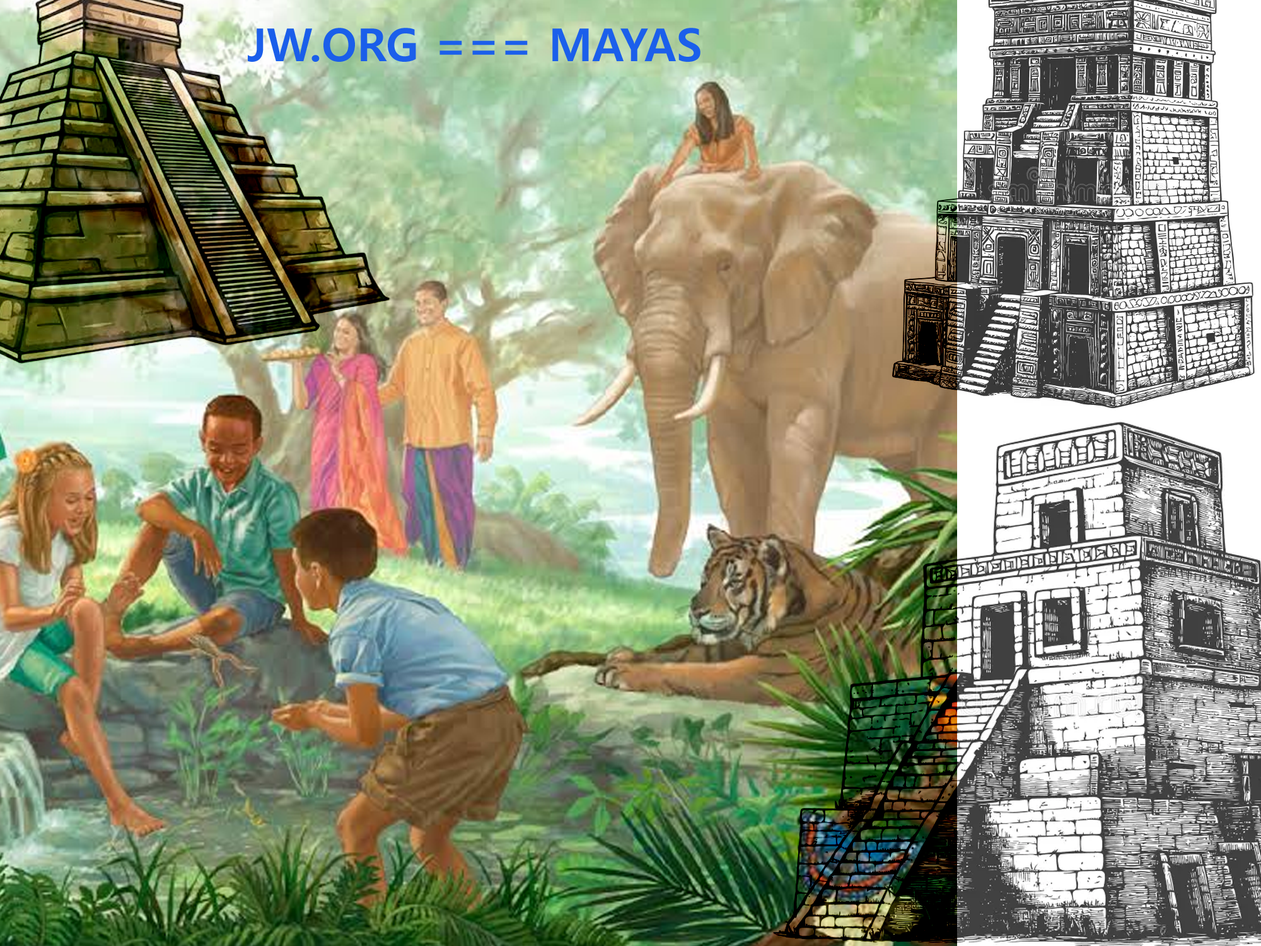
<style>
.page{position:relative;width:1261px;height:946px}
.page>*{position:absolute;margin:0}
.t1{font:45.4px "MalgunGothicBold";color:#1b5feb}
</style>
<div class="page">
<p class="t1" style="left:248px;top:28px;width:452px;height:34px">JW.ORG === MAYAS</p>
</div>
